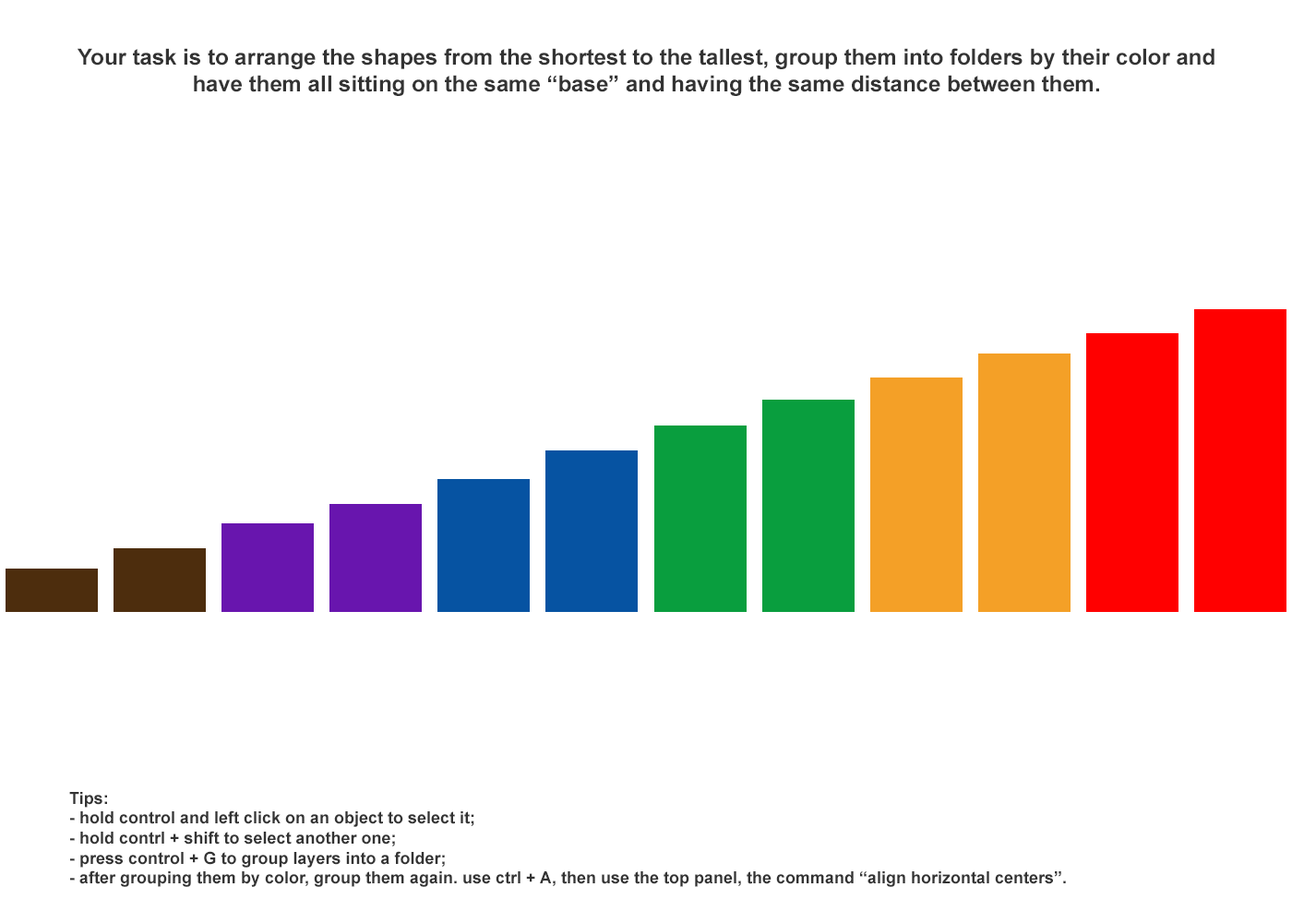
<style>
.page{position:relative;width:1292px;height:923px;background:#ffffff}
.page>*{position:absolute;margin:0}
.t1{font:22.1px "Arial-BoldMT";color:#333333}
.t2{font:16.6px "Arial-BoldMT";color:#333333}
</style>
<div class="page">
<p class="t1" style="left:78px;top:48px;width:1137px;height:48px;text-align:center">Your task is to arrange the shapes from the shortest to the tallest, group them into folders by their color and have them all sitting on the same “base” and having the same distance between them.</p>
<p class="t2" style="left:69px;top:792px;width:997px;height:95px">Tips:<br>- hold control and left click on an object to select it;<br>- hold contrl + shift to select another one;<br>- press control + G to group layers into a folder;<br>- after grouping them by color, group them again. use ctrl + A, then use the top panel, the command “align horizontal centers”.</p>
</div>
